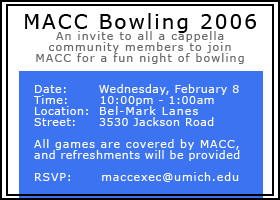
<style>
.page{position:relative;width:280px;height:200px;background:#3c73f1}
.page>*{position:absolute;margin:0}
.t1{font:11px/11px "Verdana";letter-spacing:0.1em;color:#6a6a6a}
.t2{font:20px "Verdana";letter-spacing:0.1em;color:#000000}
.t3{font:11px/11px "Verdana";letter-spacing:0.05em;color:#ffffff}
.t4{font:11px/11px "Verdana";letter-spacing:0.1em;color:#ffffff}
.t5{font:11px/11px "Verdana";letter-spacing:0.08em;color:#ffffff}
</style>
<div class="page">
<p class="t1" style="left:25px;top:13px;width:231px;height:51px;text-align:center"><span class="t2">MACC Bowling 2006<br></span>An invite to all a cappella<br>community members to join<br>MACC for a fun night of bowling</p>
<p class="t3" style="left:33px;top:84px;width:207px;height:98px">Date:       Wednesday, February 8 <br>Time:       10:00pm - 1:00am <br>Location:  <span class="t4">Bel-Mark Lanes</span> <br>Street:     3530 Jackson Road <br><br><span class="t5">All games are covered by MACC, <br></span>and refreshments will be provided<span class="t5"><br><br>RSVP:      maccexec@umich.edu</span></p>
</div>
